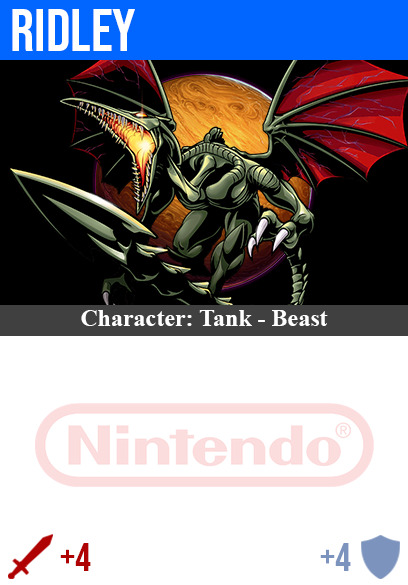
<style>
.page{position:relative;width:408px;height:585px;background:#ffffff}
.page>*{position:absolute;margin:0}
.t1{font:60px "BebasNeue-Regular";color:#ffffff}
.t2{font:24px "TimesNewRomanPS-BoldMT";color:#ffffff}
.t3{font:40px "BebasNeue-Regular";color:#af0202}
.t4{font:40px "BebasNeue-Regular";color:#7c94bd}
</style>
<div class="page">
<p class="t1" style="left:12px;top:9px;width:123px;height:42px">ridley</p>
<p class="t2" style="left:81px;top:310px;width:247px;height:16px">Character: Tank - Beast</p>
<p class="t3" style="left:60px;top:543px;width:31px;height:28px">+4</p>
<p class="t4" style="left:320px;top:543px;width:31px;height:28px">+4</p>
</div>
